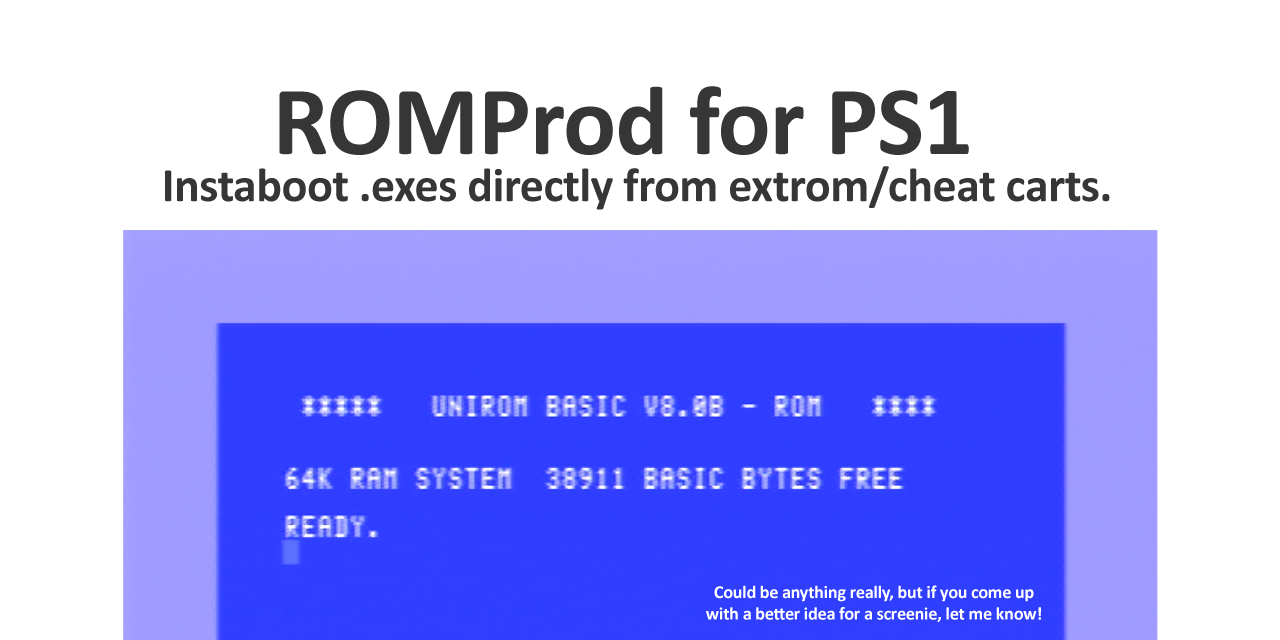
<style>
.page{position:relative;width:1280px;height:640px;background:#ffffff}
.page>*{position:absolute;margin:0}
.t1{font:99.1px "Calibri-Bold";letter-spacing:-0.01em;color:#363636}
.t2{font:48px "Calibri-Bold";letter-spacing:-0.01em;color:#363636}
.t3{font:18px "Calibri-Bold";letter-spacing:-0.01em;color:#ffffff}
</style>
<div class="page">
<p class="t1" style="left:279px;top:86px;width:690px;height:69px">ROMProd for PS1</p>
<p class="t2" style="left:165px;top:166px;width:945px;height:44px">Instaboot .exes directly from extrom/cheat carts.</p>
<p class="t3" style="left:706px;top:585px;width:335px;height:37px;text-align:center">Could be anything really, but if you come up<br>with a better idea for a screenie, let me know!</p>
</div>
